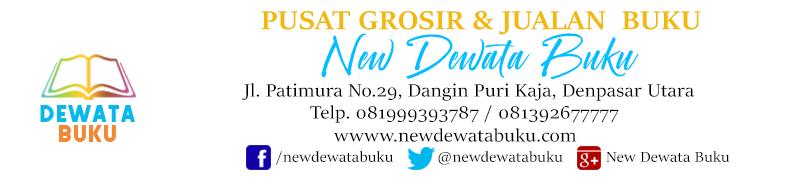
<style>
.page{position:relative;width:800px;height:179px;background:#ffffff}
.page>*{position:absolute;margin:0}
.t1{font:29.3px "SitkaBanner-Bold";letter-spacing:0.02em;color:#f3b90a;scale:1.06 1}
.t2{font:45.3px "CrownHeights";letter-spacing:0.02em;color:#01c0ff;scale:1.06 1}
.t3{font:20px "SitkaBanner";letter-spacing:0.02em;color:#000000;scale:1.06 1}
.t4{font:16px "SitkaBanner";letter-spacing:0.02em;color:#000000;scale:1.06 1}
</style>
<div class="page">
<p class="t1" style="left:261px;top:11px;width:440px;height:24px">PUSAT GROSIR &amp; JUALAN  BUKU</p>
<p class="t2" style="left:321px;top:33px;width:318px;height:47px">New Dewata Buku</p>
<p class="t3" style="left:242px;top:83px;width:453px;height:18px">Jl. Patimura No.29, Dangin Puri Kaja, Denpasar Utara</p>
<p class="t3" style="left:310px;top:105px;width:309px;height:18px">Telp. 081999393787 / 081392677777</p>
<p class="t3" style="left:333px;top:128px;width:244px;height:14px">wwww.newdewatabuku.com</p>
<p class="t4" style="left:276px;top:151px;width:117px;height:14px">/newdewatabuku</p>
<p class="t4" style="left:438px;top:151px;width:125px;height:14px">@newdewatabuku</p>
<p class="t4" style="left:606px;top:151px;width:124px;height:11px">New Dewata Buku</p>
</div>
